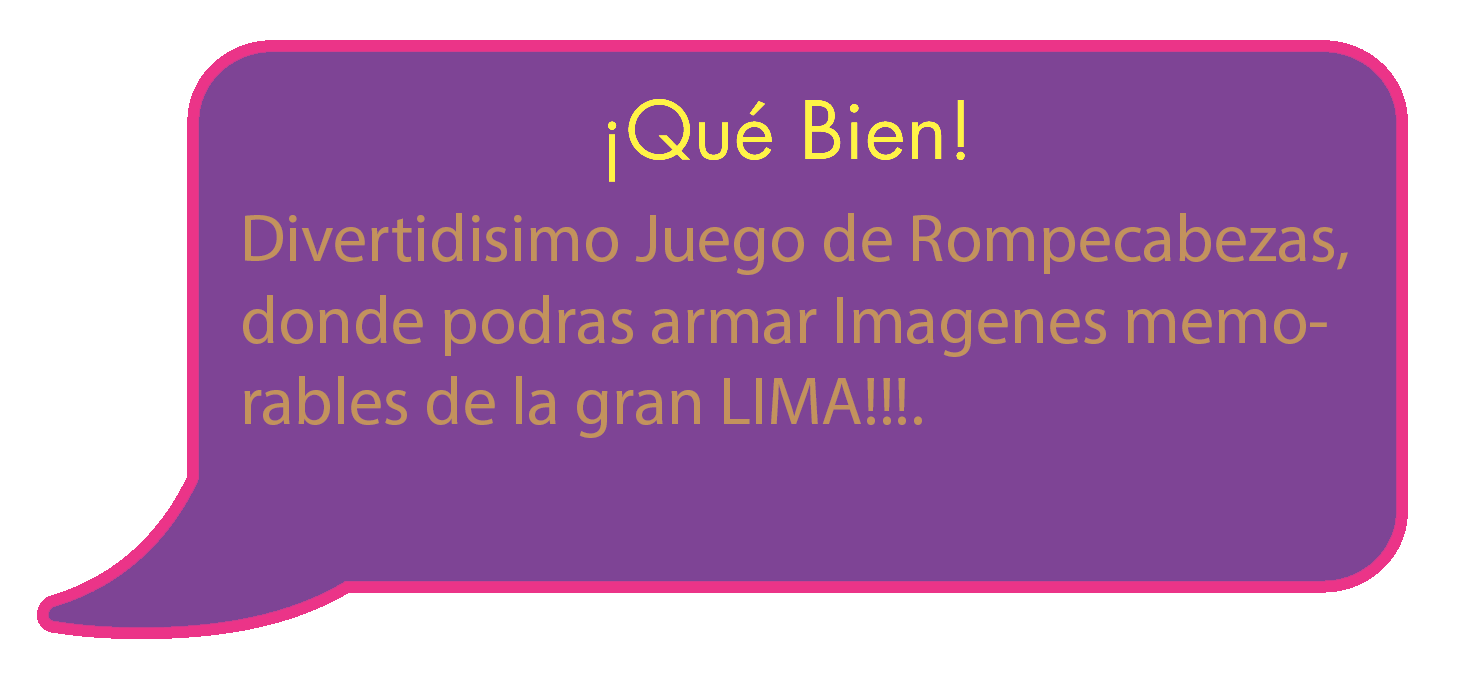
<style>
.page{position:relative;width:1472px;height:686px;background:#7e4495}
.page>*{position:absolute;margin:0}
.t1{font:68px "MyriadPro-Regular";color:#c3925d}
</style>
<div class="page">
<p class="t1" style="left:243px;top:213px;width:1105px;height:225px">Divertidisimo Juego de Rompecabezas, donde podras armar Imagenes memorables de la gran LIMA!!!.</p>
</div>
